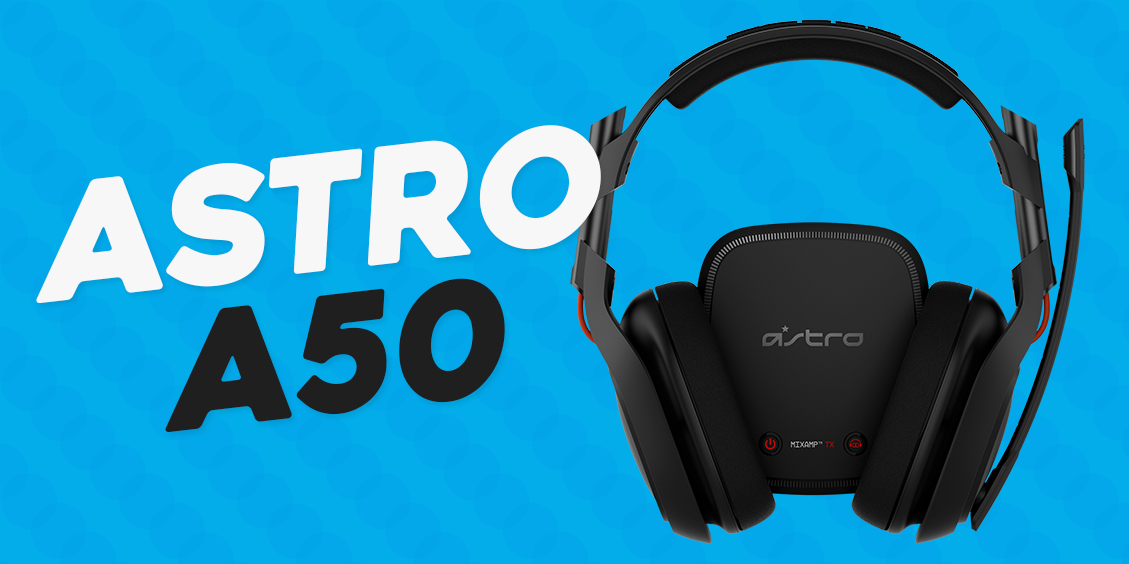
<style>
.page{position:relative;width:1129px;height:564px;background:#02a8e9}
.page>*{position:absolute;margin:0}
.t1{font:160px "Heavitas";color:#f7f7f7;font-style:italic}
.t2{font:160px "Heavitas";color:#1f1f1f;font-style:italic}
</style>
<div class="page">
<p class="t1" style="left:36px;top:125px;width:565px;height:178px;rotate:-7deg">ASTRO</p>
<p class="t2" style="left:165px;top:278px;width:340px;height:154px;rotate:-7deg">A50</p>
</div>
